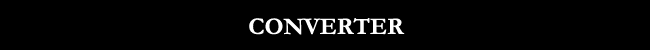
<style>
.page{position:relative;width:650px;height:50px;background:#000000}
.page>*{position:absolute;margin:0}
.t1{font:24px "Garamond-Bold";color:#ffffff}
</style>
<div class="page">
<p class="t1" style="left:249px;top:18px;width:156px;height:17px">CONVERTER</p>
</div>
